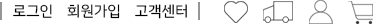
<style>
.page{position:relative;width:373px;height:24px;background:#ffffff}
.page>*{position:absolute;margin:0}
.t1{font:15px "IBMPlexSansKR";color:#000000}
</style>
<div class="page">
<p class="t1" style="left:13px;top:4px;width:174px;height:15px">로그인    회원가입    고객센터</p>
</div>
